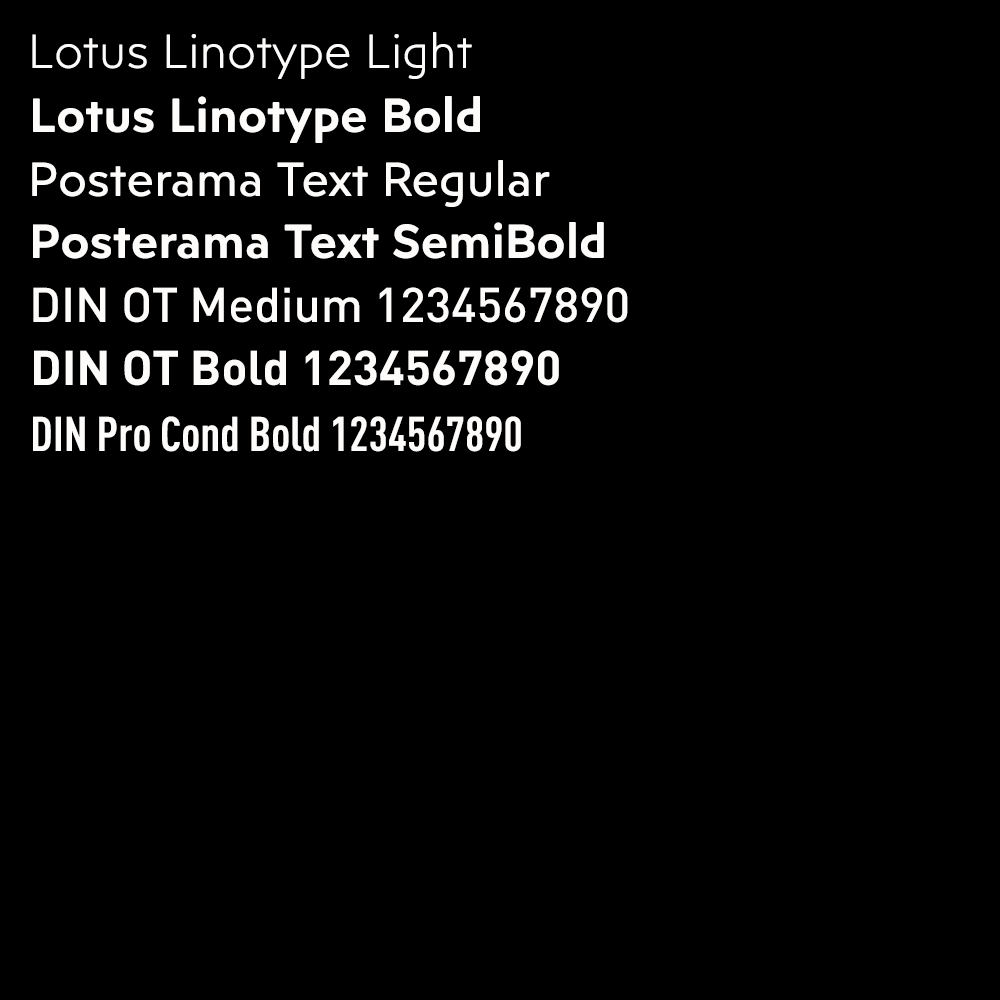
<style>
.page{position:relative;width:1000px;height:1000px;background:#000000}
.page>*{position:absolute;margin:0}
.t1{font:48px "LotusLinotype-Light";color:#fdfcfb}
.t2{font:48px "LotusLinotype-Bold";color:#fdfcfb}
.t3{font:48px "PosteramaText-Regular";color:#fdfcfb}
.t4{font:48px "PosteramaText-SemiBold";color:#fdfcfb}
.t5{font:48px "DINOT-Medium";color:#fdfcfb}
.t6{font:48px "DINOT-Bold";color:#fdfcfb}
.t7{font:48px "DINPro-CondBold";color:#fdfcfb}
</style>
<div class="page">
<p class="t1" style="left:32px;top:32px;width:440px;height:47px">Lotus Linotype Light</p>
<p class="t2" style="left:33px;top:96px;width:447px;height:47px">Lotus Linotype Bold</p>
<p class="t3" style="left:32px;top:160px;width:518px;height:47px">Posterama Text Regular</p>
<p class="t4" style="left:33px;top:222px;width:571px;height:37px">Posterama Text SemiBold</p>
<p class="t5" style="left:33px;top:287px;width:595px;height:36px">DIN OT Medium 1234567890</p>
<p class="t6" style="left:34px;top:350px;width:525px;height:36px">DIN OT Bold 1234567890</p>
<p class="t7" style="left:33px;top:416px;width:488px;height:36px">DIN Pro Cond Bold 1234567890</p>
</div>
